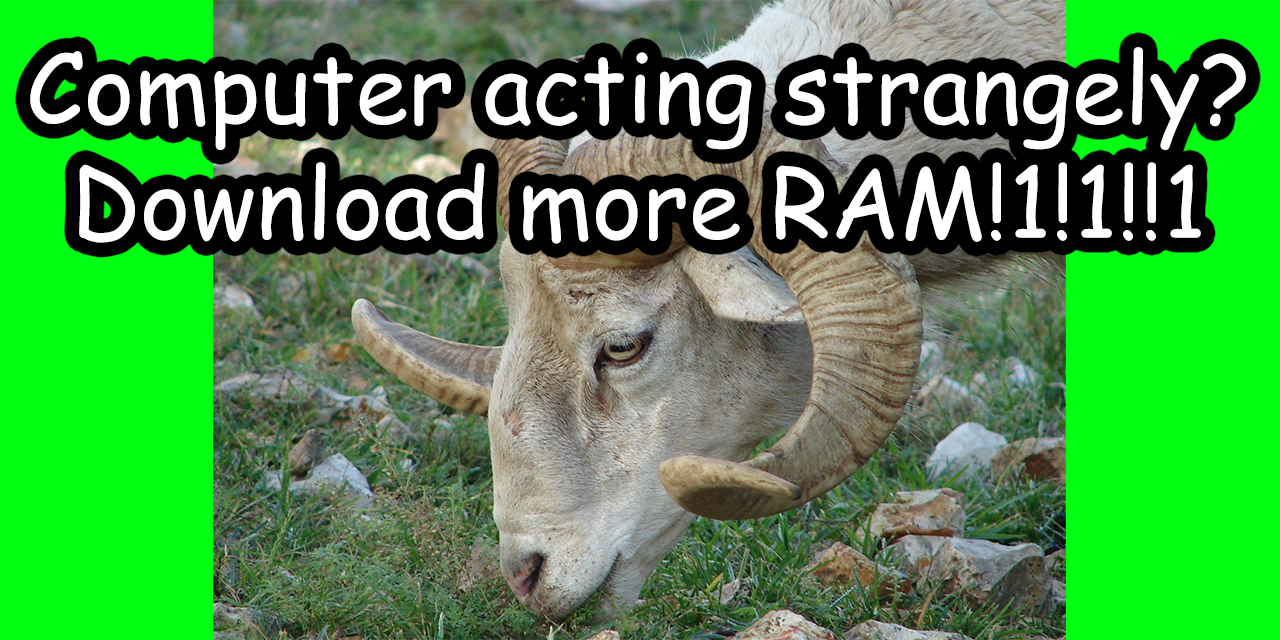
<style>
.page{position:relative;width:1280px;height:640px;background:#00ff12}
.page>*{position:absolute;margin:0}
.t1{font:96px "ComicSansMS";color:#ffffff}
</style>
<div class="page">
<p class="t1" style="left:30px;top:47px;width:1216px;height:197px;text-align:center">Computer acting strangely?<br>Download more RAM!1!1!!1</p>
</div>
